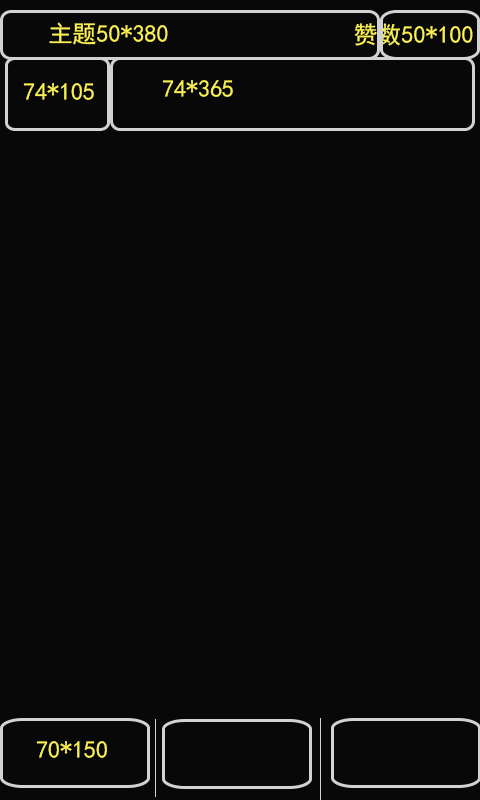
<style>
.page{position:relative;width:480px;height:800px;background:#090808}
.page>*{position:absolute;margin:0}
.t1{font:24px "SimHei";color:#faf054}
</style>
<div class="page">
<p class="t1" style="left:49px;top:22px;width:119px;height:23px">主题50*380</p>
<p class="t1" style="left:354px;top:23px;width:119px;height:23px">赞数50*100</p>
<p class="t1" style="left:23px;top:83px;width:71px;height:17px">74*105</p>
<p class="t1" style="left:162px;top:80px;width:71px;height:17px">74*365</p>
<p class="t1" style="left:36px;top:741px;width:71px;height:17px">70*150</p>
</div>
